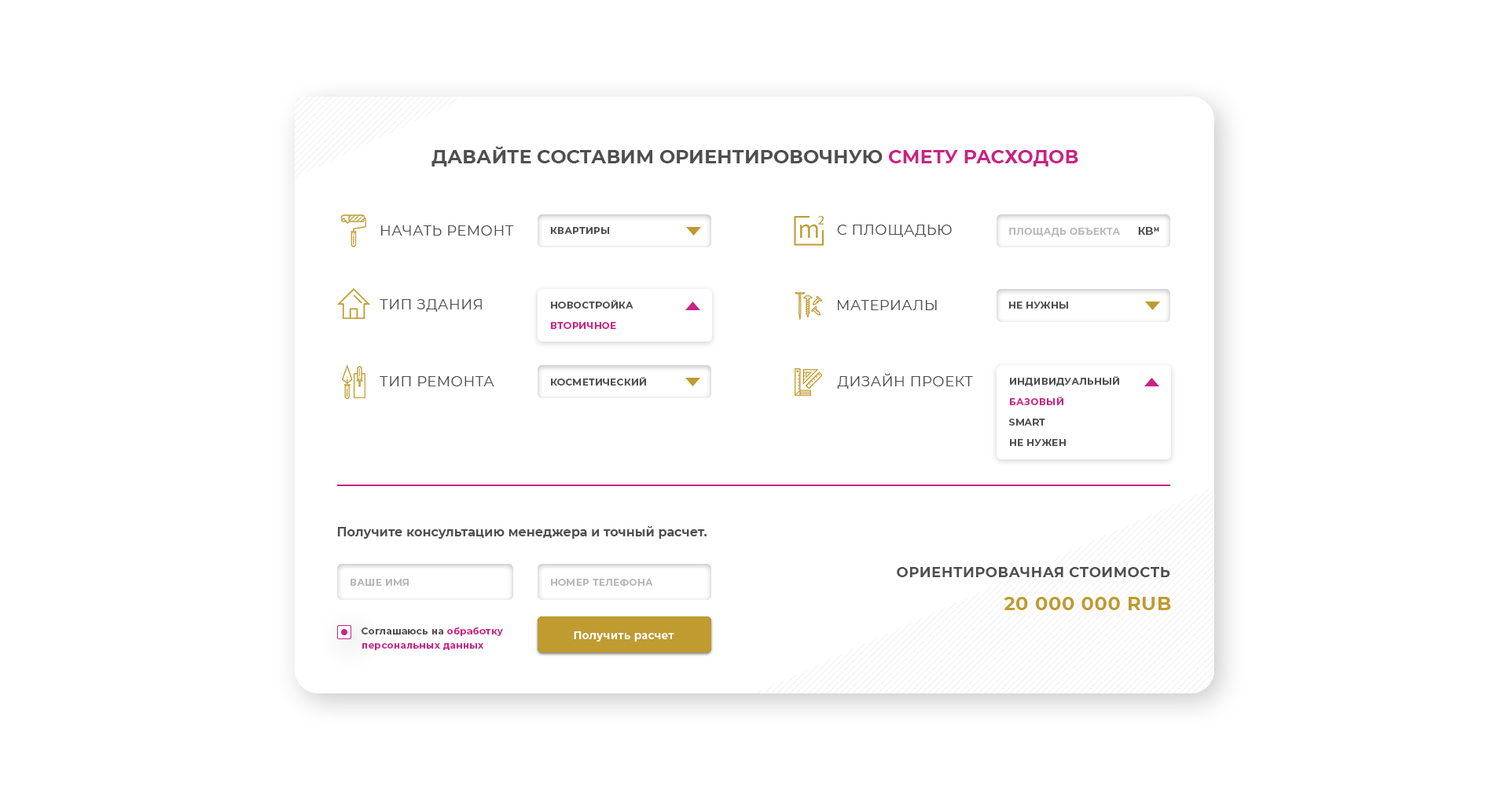
<style>
.page{position:relative;width:1509px;height:790px;background:#ffffff}
.page>*{position:absolute;margin:0}
.t1{font:18.9px "Montserrat-Bold";color:#4f4f4f}
.t2{font:18.9px "Montserrat-Bold";color:#c92385}
.t3{font:14.1px "Montserrat-Regular";letter-spacing:0.03em;color:#4f4f4f}
.t4{font:9.4px "Montserrat-Bold";letter-spacing:0.03em;color:#4f4f4f}
.t5{font:9.4px "Montserrat-Bold";letter-spacing:0.03em;color:#b8b8b8}
.t6{font:10.5px "Montserrat-Bold";letter-spacing:0.03em;color:#4f4f4f}
.t7{font:9.4px "Montserrat-Bold";letter-spacing:0.03em}
.t8{font:9.4px "Montserrat-Bold";letter-spacing:0.03em;color:#c92385}
.t9{font:12.6px "Montserrat-Bold";color:#4f4f4f}
.t10{font:14.1px "Montserrat-Bold";letter-spacing:0.03em;color:#4f4f4f}
.t11{font:18.9px "Montserrat-Bold";letter-spacing:0.03em;color:#bf9b30}
.t12{font:9.4px/14.1px "Montserrat-Bold";letter-spacing:0.03em;color:#c92385}
.t13{font:9.4px/14.1px "Montserrat-Bold";letter-spacing:0.03em;color:#4f4f4f}
.t14{font:10.5px "Montserrat-Bold";letter-spacing:0.03em;color:#ffffff}
</style>
<div class="page">
<p class="t1" style="left:431px;top:146px;width:647px;height:21px">ДАВАЙТЕ СОСТАВИМ ОРИЕНТИРОВОЧНУЮ <span class="t2">СМЕТУ РАСХОДОВ</span></p>
<p class="t3" style="left:381px;top:226px;width:133px;height:10px">НАЧАТЬ РЕМОНТ</p>
<p class="t4" style="left:550px;top:227px;width:60px;height:7px">КВАРТИРЫ</p>
<p class="t3" style="left:837px;top:225px;width:115px;height:12px">С ПЛОЩАДЬЮ</p>
<p class="t5" style="left:1009px;top:228px;width:111px;height:9px">ПЛОЩАДЬ ОБЪЕКТА</p>
<p class="t6" style="left:1138px;top:227px;width:21px;height:8px">КВМ</p>
<p class="t3" style="left:380px;top:299px;width:102px;height:13px">ТИП ЗДАНИЯ</p>
<p class="t7" style="left:551px;top:301px;width:82px;height:9px">НОВОСТРОЙКА</p>
<p class="t4" style="left:551px;top:300px;width:82px;height:9px">НОВОСТРОЙКА</p>
<p class="t3" style="left:838px;top:300px;width:99px;height:10px">МАТЕРИАЛЫ</p>
<p class="t4" style="left:1008px;top:302px;width:60px;height:7px">НЕ НУЖНЫ</p>
<p class="t8" style="left:551px;top:322px;width:65px;height:7px">ВТОРИЧНОЕ</p>
<p class="t3" style="left:380px;top:376px;width:114px;height:11px">ТИП РЕМОНТА</p>
<p class="t4" style="left:551px;top:377px;width:95px;height:9px">КОСМЕТИЧЕСКИЙ</p>
<p class="t3" style="left:837px;top:373px;width:136px;height:16px">ДИЗАЙН ПРОЕКТ</p>
<p class="t4" style="left:1010px;top:376px;width:109px;height:11px">ИНДИВИДУАЛЬНЫЙ</p>
<p class="t8" style="left:1010px;top:397px;width:53px;height:8px">БАЗОВЫЙ</p>
<p class="t4" style="left:1009px;top:419px;width:36px;height:7px">SMART</p>
<p class="t4" style="left:1010px;top:439px;width:55px;height:7px">НЕ НУЖЕН</p>
<p class="t9" style="left:337px;top:526px;width:370px;height:13px">Получите консультацию менеджера и точный расчет.</p>
<p class="t10" style="left:897px;top:567px;width:273px;height:11px">ОРИЕНТИРОВАЧНАЯ СТОИМОСТЬ</p>
<p class="t5" style="left:350px;top:579px;width:59px;height:7px">ВАШЕ ИМЯ</p>
<p class="t5" style="left:551px;top:579px;width:102px;height:8px">НОМЕР ТЕЛЕФОНА</p>
<p class="t11" style="left:1003px;top:597px;width:168px;height:14px">20 000 000 RUB</p>
<p class="t12" style="left:361px;top:627px;width:142px;height:24px"><span class="t13">Соглашаюсь на </span>обработку<br>персональных данных</p>
<p class="t14" style="left:574px;top:632px;width:100px;height:10px">Получить расчет</p>
<p class="t14" style="left:574px;top:632px;width:100px;height:10px">Получить расчет</p>
</div>
